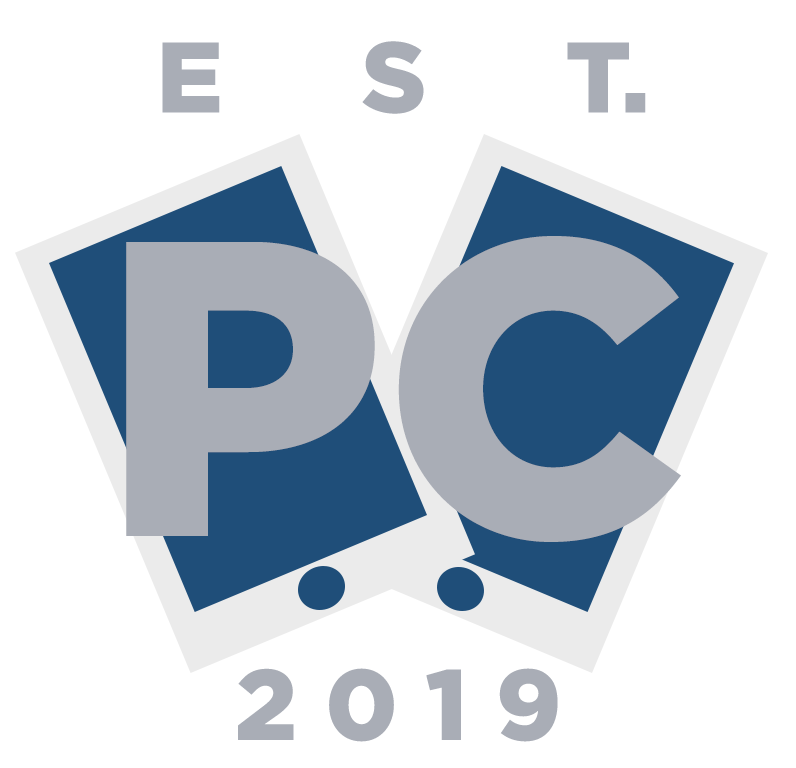
<style>
.page{position:relative;width:796px;height:768px;background:#ffffff}
.page>*{position:absolute;margin:0}
.t1{font:100px "Gotham-Black";color:#a9adb6}
.t2{font:420px "Gotham-Black";color:#a9adb6}
</style>
<div class="page">
<p class="t1" style="left:162px;top:41px;width:484px;height:73px">E     S     T.</p>
<p class="t2" style="left:126px;top:236px;width:555px;height:306px">PC</p>
<p class="t1" style="left:238px;top:668px;width:320px;height:74px">2 0 1 9</p>
</div>
